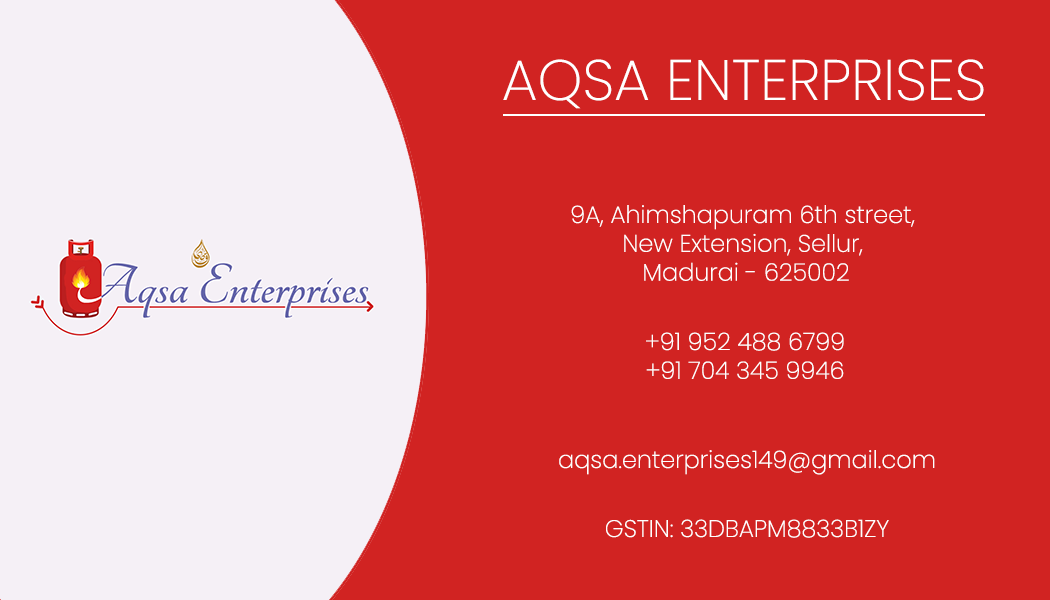
<style>
.page{position:relative;width:1050px;height:600px;background:#d12322}
.page>*{position:absolute;margin:0}
.t1{font:57px "Poppins-ExtraLight";color:#ffffff}
.t2{font:24px "Poppins-ExtraLight";color:#ffffff}
</style>
<div class="page">
<p class="t1" style="left:503px;top:59px;width:481px;height:50px">AQSA ENTERPRISES</p>
<p class="t2" style="left:571px;top:205px;width:344px;height:76px;text-align:center">9A, Ahimshapuram 6th street, <br>New Extension, Sellur, <br>Madurai - 625002</p>
<p class="t2" style="left:646px;top:332px;width:198px;height:47px;text-align:center">+91 952 488 6799<br>+91 704 345 9946</p>
<p class="t2" style="left:559px;top:450px;width:376px;height:25px">aqsa.enterprises149@gmail.com</p>
<p class="t2" style="left:606px;top:519px;width:283px;height:19px">GSTIN: 33DBAPM8833B1ZY</p>
</div>
